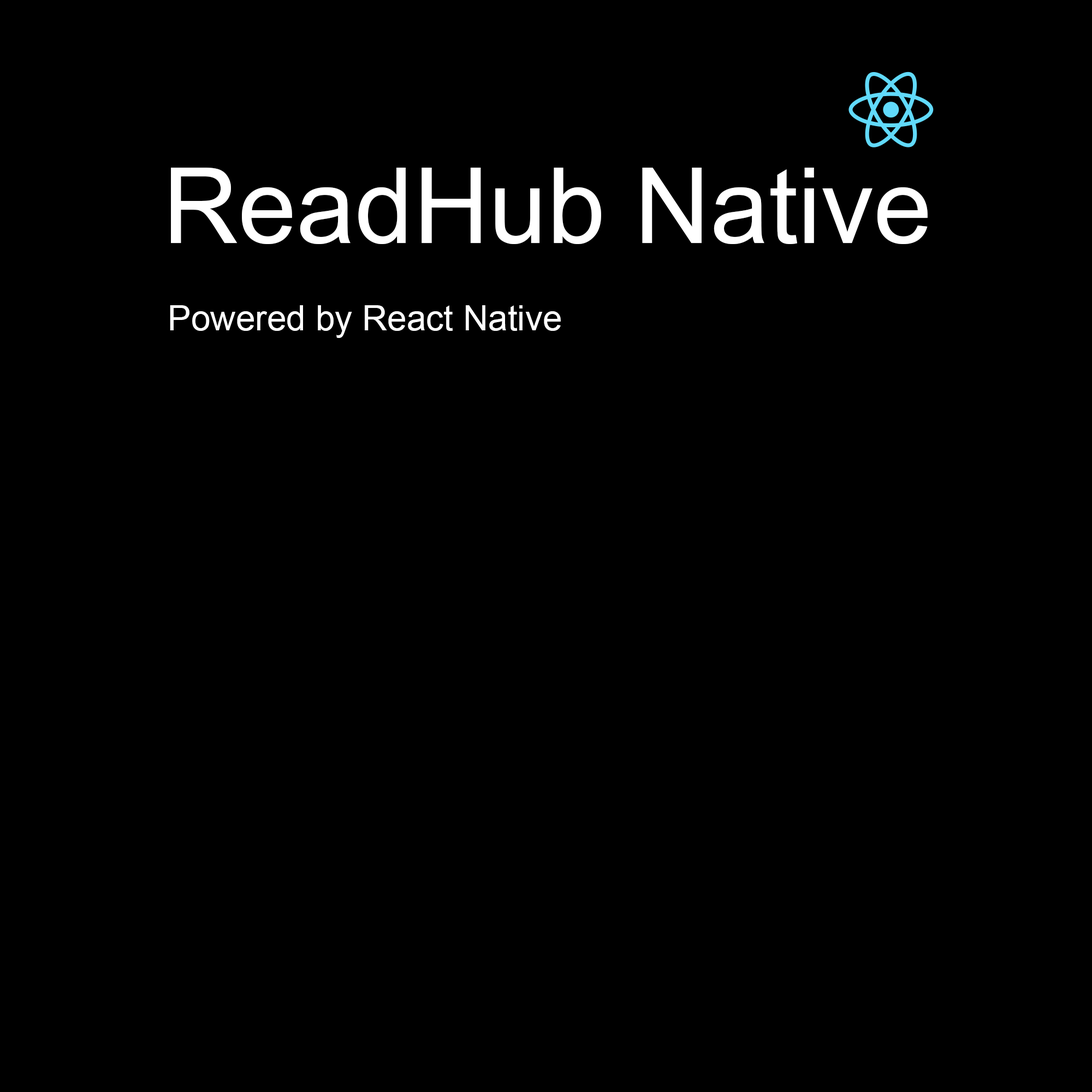
<style>
.page{position:relative;width:1092px;height:1092px;background:#000000}
.page>*{position:absolute;margin:0}
.t1{font:104.8px "ArialMT";color:#ffffff}
.t2{font:34.9px "ArialMT";color:#ffffff}
</style>
<div class="page">
<p class="t1" style="left:171px;top:168px;width:757px;height:76px">ReadHub Native</p>
<p class="t2" style="left:170px;top:305px;width:391px;height:33px">Powered by React Native</p>
</div>
